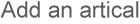
<style>
.page{position:relative;width:140px;height:24px;background:#ffffff}
.page>*{position:absolute;margin:0}
.t1{font:22.7px "ArialMT";color:#5c5c5c}
</style>
<div class="page">
<p class="t1" style="left:0px;top:1px;width:139px;height:17px">Add an artical</p>
</div>
